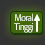
<style>
.page{position:relative;width:45px;height:45px}
.page>*{position:absolute;margin:0}
.t1{font:10px/9px "AdobeClean-Regular";letter-spacing:-0.08em;color:#ffffff;scale:0.9 1}
</style>
<div class="page">
<p class="t1" style="left:14px;top:13px;width:20px;height:20px;text-align:center">Moral<br>Tinggi</p>
</div>
